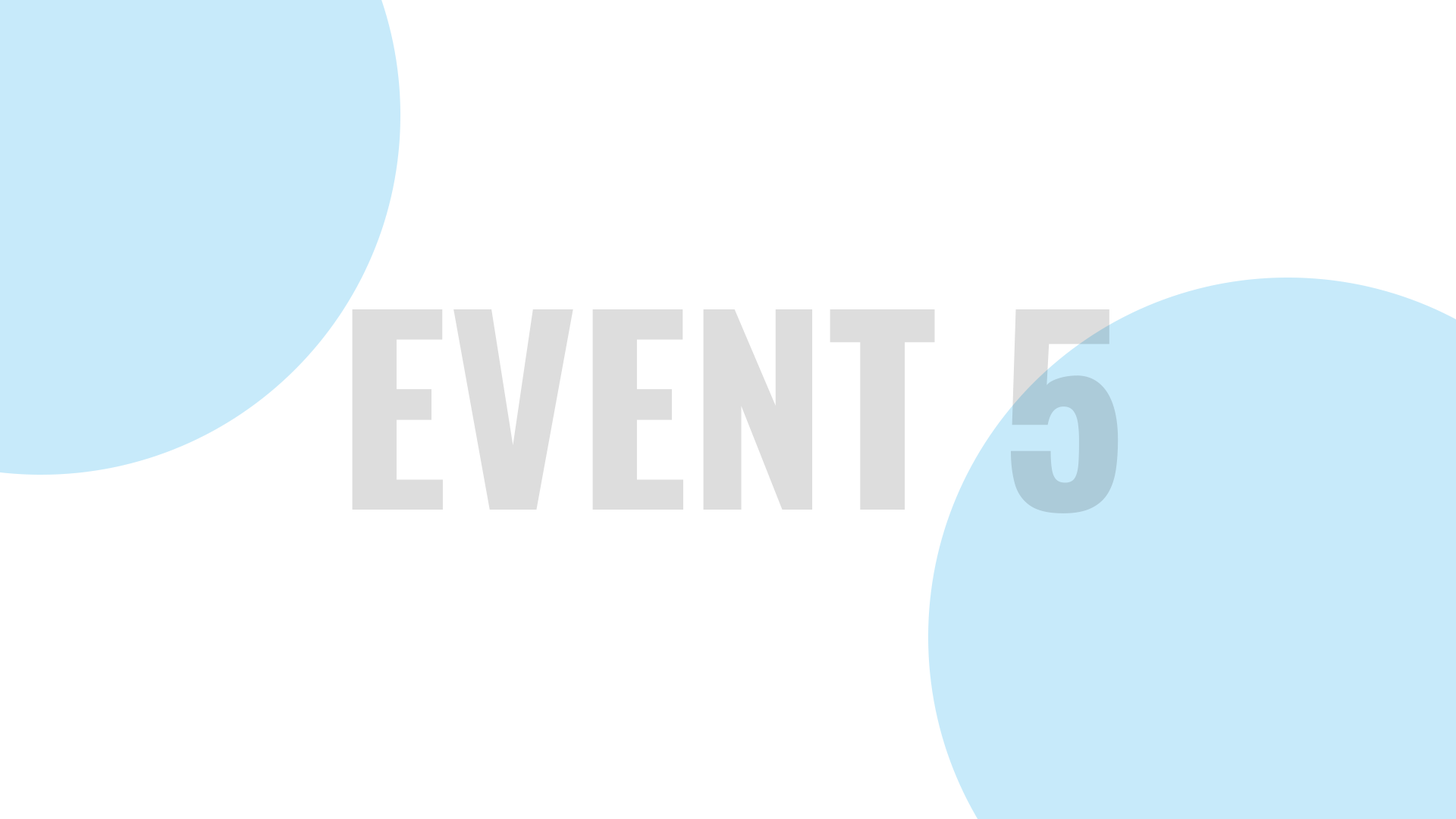
<style>
.page{position:relative;width:1456px;height:819px;background:#ffffff}
.page>*{position:absolute;margin:0}
.t1{font:247.2px "Oswald-Bold";color:#dddddd}
</style>
<div class="page">
<p class="t1" style="left:352px;top:309px;width:767px;height:204px">EVENT 5</p>
</div>
